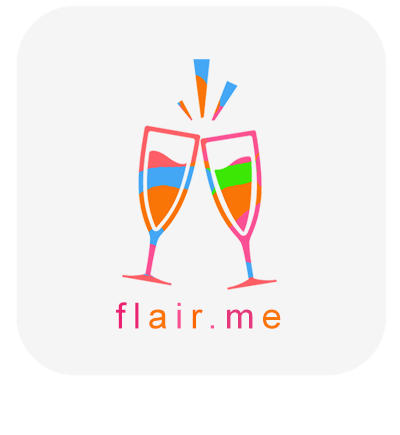
<style>
.page{position:relative;width:400px;height:435px;background:#f5f5f5}
.page>*{position:absolute;margin:0}
.t1{font:36px "ArialMT";letter-spacing:0.2em;color:#ed2172}
.t2{font:36px "ArialMT";letter-spacing:0.2em;color:#fa7406}
.t3{font:36px "ArialMT";letter-spacing:0.2em;color:#fb4f94}
.t4{font:36px "ArialMT";letter-spacing:0.2em;color:#ff6600}
.t5{font:36px "ArialMT";letter-spacing:0.2em;color:#fc5095}
.t6{font:36px "ArialMT";letter-spacing:0.2em;color:#e6377c}
</style>
<div class="page">
<p class="t1" style="left:116px;top:302px;width:165px;height:27px">fl<span class="t2">a</span><span class="t3">i</span><span class="t4">r</span><span class="t5">.</span><span class="t6">m</span><span class="t2">e</span></p>
</div>
